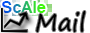
<style>
.page{position:relative;width:90px;height:33px;background:#ffffff}
.page>*{position:absolute;margin:0}
.t1{font:12px "Mangal-Bold"}
.t2{font:24px "SegoePrint";color:#000000}
</style>
<div class="page">
<p class="t1" style="left:1px;top:1px;width:45px;height:12px">ScAle</p>
<p class="t2" style="left:36px;top:11px;width:50px;height:21px">Mail</p>
</div>
